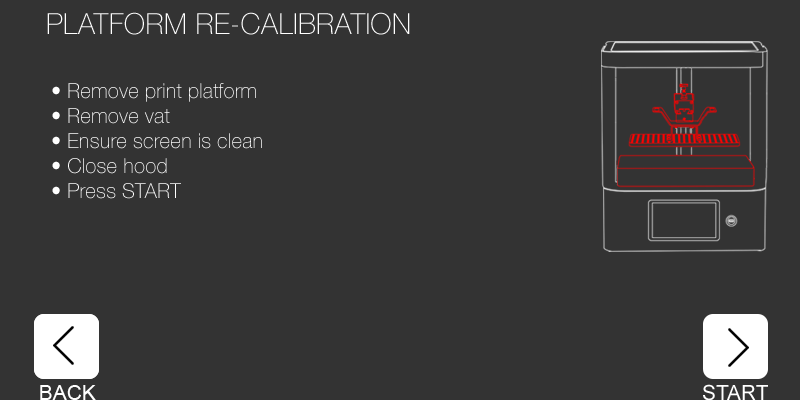
<style>
.page{position:relative;width:800px;height:400px;background:#333333}
.page>*{position:absolute;margin:0}
.t1{font:20.8px "HelveticaNeue-Thin";color:#ffffff}
</style>
<div class="page">
<p class="t1" style="left:52px;top:83px;width:210px;height:116px">• Remove print platform<br>• Remove vat<br>• Ensure screen is clean<br>• Close hood<br>• Press START</p>
</div>
